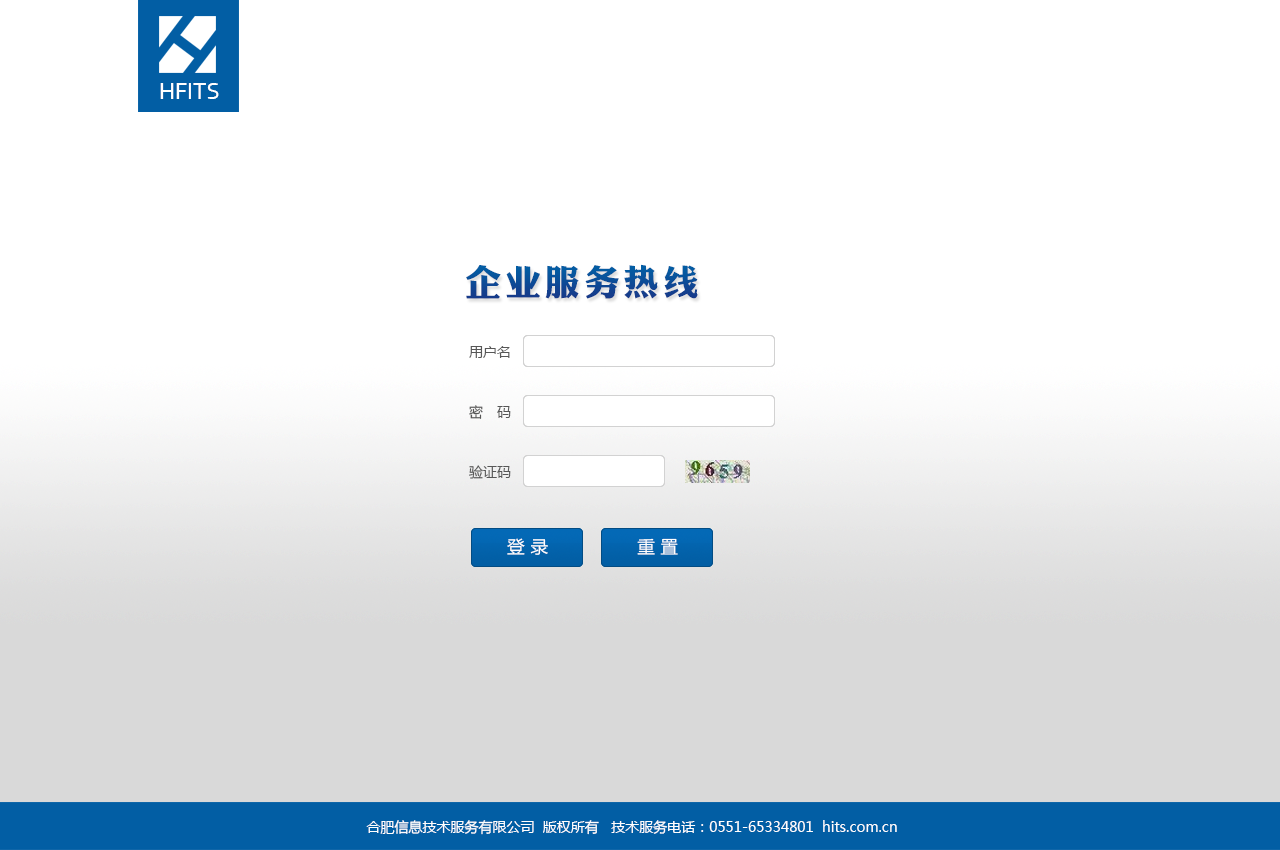
<style>
.page{position:relative;width:1280px;height:850px;background:#ffffff}
.page>*{position:absolute;margin:0}
.t1{font:24px "Corbel";color:#ffffff}
.t2{font:36px "DFPLiJinHeiW8";letter-spacing:0.1em;color:#025ea4}
.t3{font:14px/60px "MicrosoftYaHei";color:#575757}
.t4{font:18px "ZpixEX2";letter-spacing:0.05em;color:#ffffff}
.t5{font:14px "MicrosoftYaHei";color:#ffffff}
</style>
<div class="page">
<p class="t1" style="left:160px;top:83px;width:59px;height:16px">HFITS</p>
<p class="t2" style="left:466px;top:264px;width:232px;height:35px">企业服务热线</p>
<p class="t3" style="left:469px;top:346px;width:42px;height:133px">用户名<br>密　码<br>验证码</p>
<p class="t4" style="left:507px;top:538px;width:41px;height:17px">登 录</p>
<p class="t4" style="left:637px;top:538px;width:41px;height:17px">重 置</p>
<p class="t5" style="left:366px;top:820px;width:531px;height:15px">合肥信息技术服务有限公司  版权所有   技术服务电话：0551-65334801  hits.com.cn</p>
</div>
